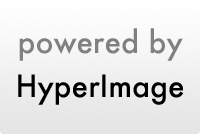
<style>
.page{position:relative;width:200px;height:134px}
.page>*{position:absolute;margin:0}
.t1{font:30px/34px "Futura-Medium";color:#808080}
.t2{font:30px/44px "Futura-Medium";color:#000000}
</style>
<div class="page">
<p class="t1" style="left:18px;top:28px;width:166px;height:77px;text-align:center">powered by<br><span class="t2">HyperImage</span></p>
</div>
